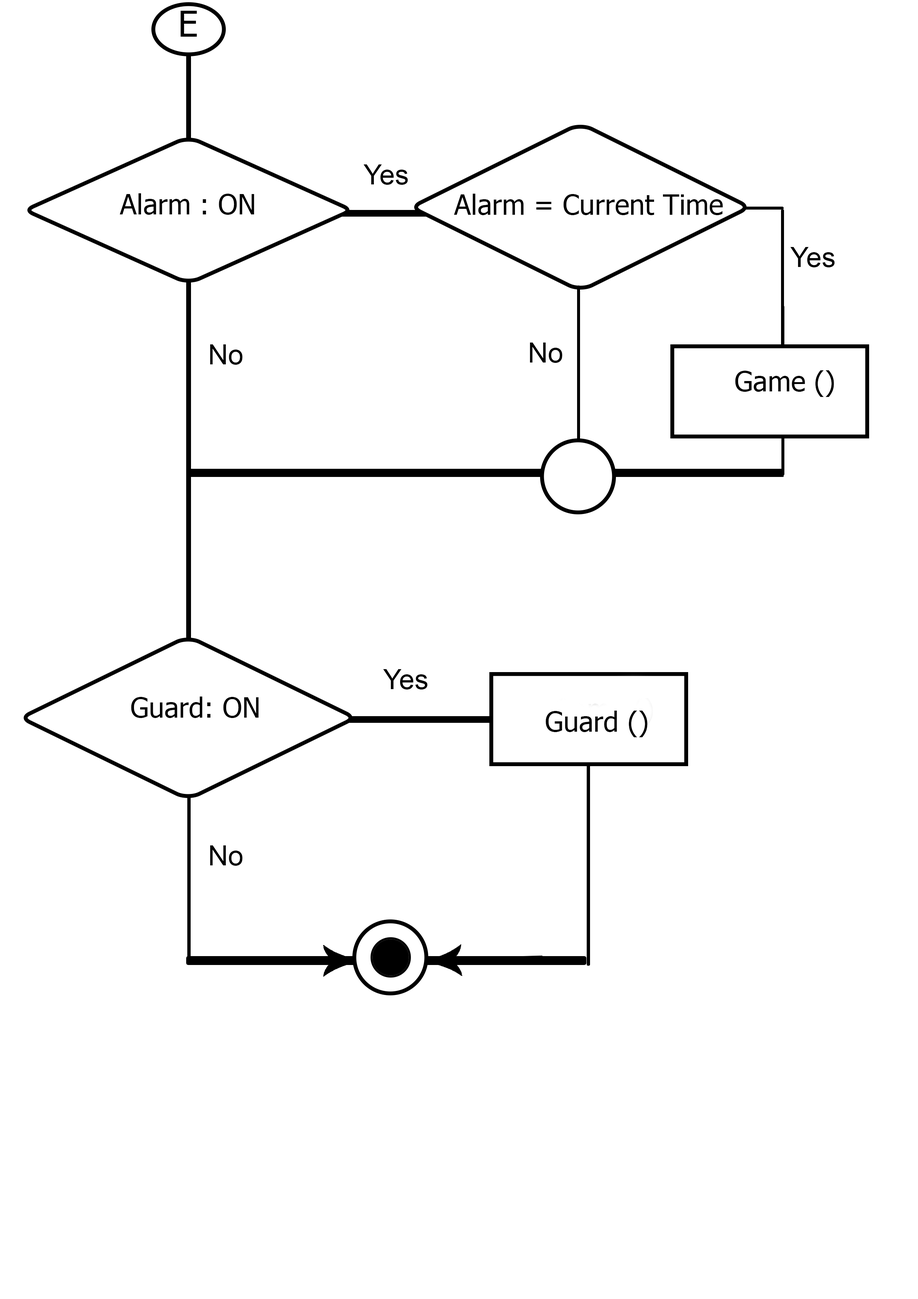
<style>
.page{position:relative;width:918px;height:1299px;background:#ffffff}
.page>*{position:absolute;margin:0}
.t1{font:27.8px "ArialMT";color:#000000}
.t2{font:27.8px "Tahoma";color:#000000}
</style>
<div class="page">
<p class="t1" style="left:364px;top:164px;width:44px;height:21px">Yes</p>
<p class="t2" style="left:454px;top:194px;width:269px;height:21px">Alarm = Current Time</p>
<p class="t1" style="left:790px;top:247px;width:45px;height:20px">Yes</p>
<p class="t1" style="left:210px;top:344px;width:32px;height:21px">No</p>
<p class="t1" style="left:530px;top:342px;width:32px;height:21px">No</p>
<p class="t1" style="left:383px;top:669px;width:45px;height:20px">Yes</p>
<p class="t1" style="left:210px;top:845px;width:32px;height:21px">No</p>
</div>
